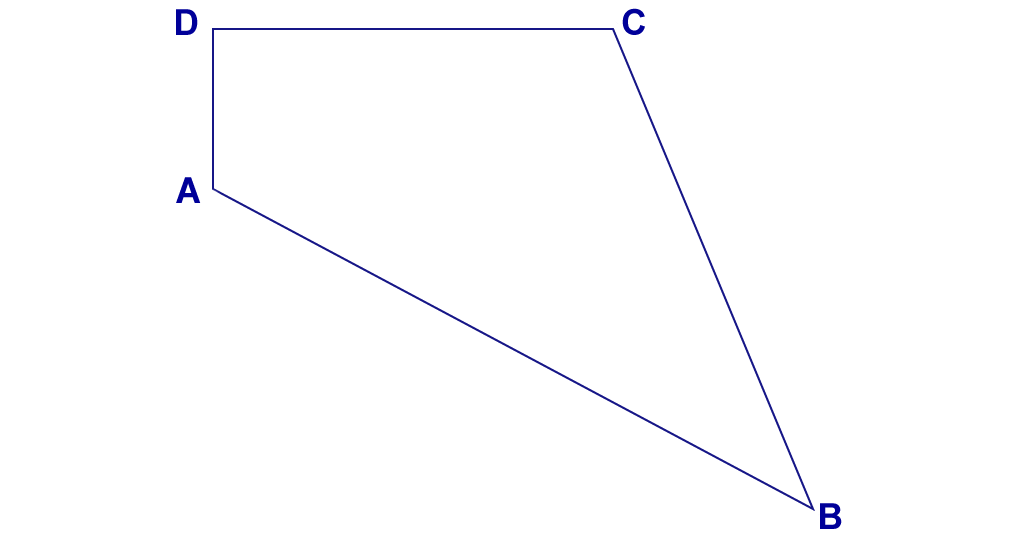
<style>
.page{position:relative;width:1024px;height:537px;background:#ffffff}
.page>*{position:absolute;margin:0}
.t1{font:36px "Arial-BoldMT";color:#000099}
</style>
<div class="page">
<p class="t1" style="left:176px;top:9px;width:22px;height:26px">D</p>
<p class="t1" style="left:622px;top:8px;width:23px;height:27px">C</p>
<p class="t1" style="left:176px;top:177px;width:25px;height:26px">A</p>
<p class="t1" style="left:820px;top:503px;width:22px;height:26px">B</p>
</div>
